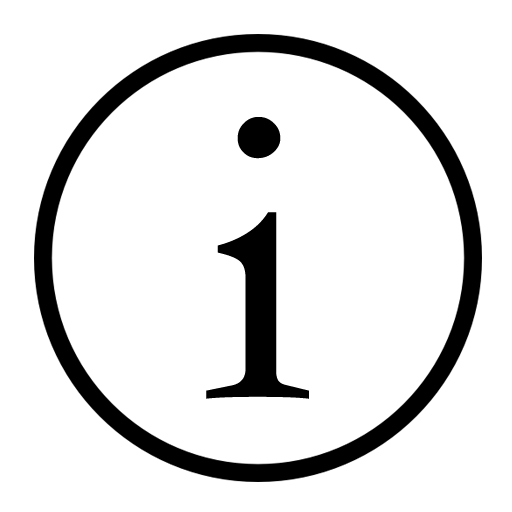
<style>
.page{position:relative;width:512px;height:512px;background:#ffffff}
.page>*{position:absolute;margin:0}
.t1{font:460.8px "STSongti-SC-Regular";color:#000000}
</style>
<div class="page">
<p class="t1" style="left:206px;top:117px;width:103px;height:282px">i</p>
</div>
